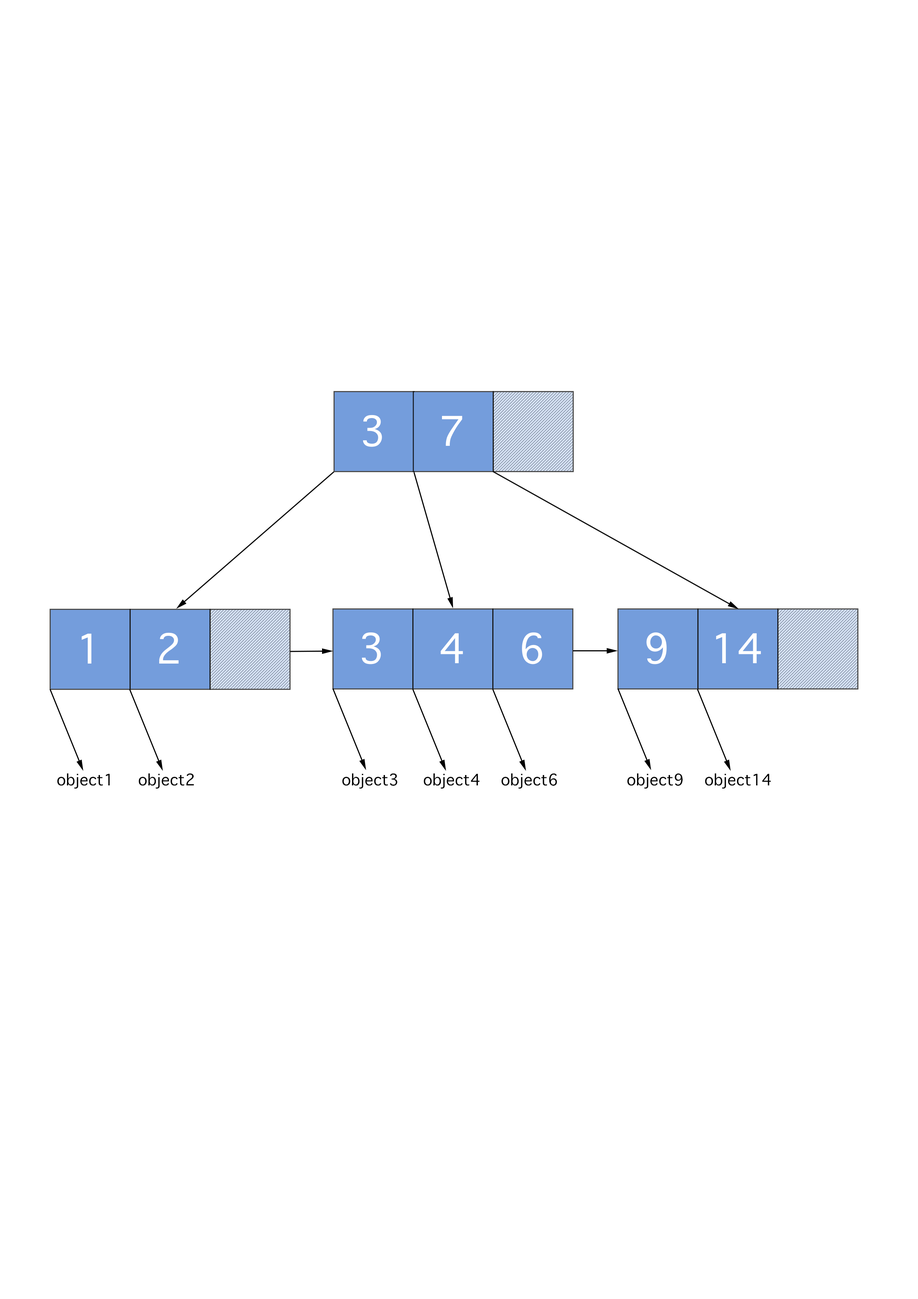
<style>
.page{position:relative;width:918px;height:1299px;background:#ffffff}
.page>*{position:absolute;margin:0}
.t1{font:55.5px "AppleSymbols";color:#ffffff}
.t2{font:21.6px "AppleSymbols";color:#000000}
</style>
<div class="page">
<p class="t1" style="left:363px;top:415px;width:19px;height:32px">3</p>
<p class="t1" style="left:442px;top:416px;width:20px;height:30px">7</p>
<p class="t1" style="left:81px;top:633px;width:10px;height:30px">1</p>
<p class="t1" style="left:159px;top:632px;width:20px;height:31px">2</p>
<p class="t1" style="left:362px;top:632px;width:19px;height:32px">3</p>
<p class="t1" style="left:441px;top:633px;width:22px;height:30px">4</p>
<p class="t1" style="left:522px;top:632px;width:20px;height:32px">6</p>
<p class="t1" style="left:646px;top:632px;width:21px;height:32px">9</p>
<p class="t1" style="left:716px;top:633px;width:45px;height:30px">14</p>
<p class="t2" style="left:57px;top:773px;width:53px;height:16px">object1</p>
<p class="t2" style="left:139px;top:773px;width:55px;height:16px">object2</p>
<p class="t2" style="left:342px;top:773px;width:56px;height:16px">object3</p>
<p class="t2" style="left:424px;top:773px;width:56px;height:16px">object4</p>
<p class="t2" style="left:502px;top:773px;width:55px;height:16px">object6</p>
<p class="t2" style="left:628px;top:773px;width:55px;height:16px">object9</p>
<p class="t2" style="left:705px;top:773px;width:66px;height:16px">object14</p>
</div>
